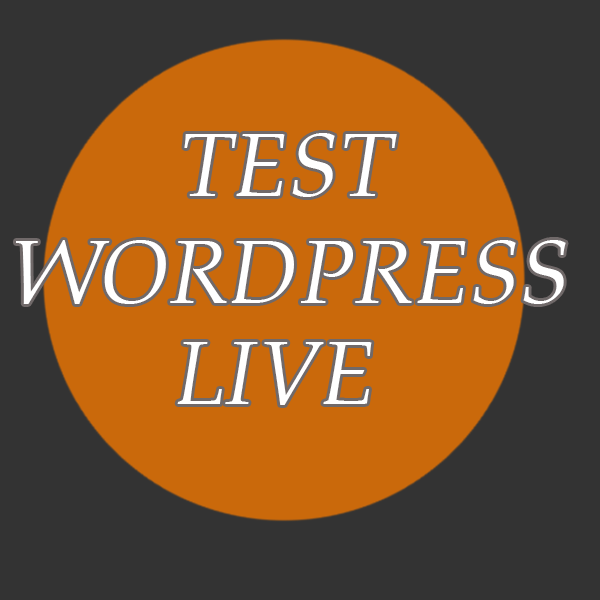
<style>
.page{position:relative;width:600px;height:600px;background:#333333}
.page>*{position:absolute;margin:0}
.t1{font:90px "BookAntiqua-Italic";color:#ffffff}
.t2{font:89.9px "BookAntiqua-Italic";color:#ffffff}
</style>
<div class="page">
<p class="t1" style="left:184px;top:133px;width:213px;height:64px">TEST</p>
<p class="t1" style="left:16px;top:240px;width:550px;height:64px">WORDPRESS</p>
<p class="t2" style="left:177px;top:342px;width:195px;height:63px">LIVE</p>
</div>
